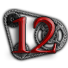
<style>
.page{position:relative;width:68px;height:68px;background:#ffffff}
.page>*{position:absolute;margin:0}
.t1{font:48px "Castellar";font-weight:bold}
</style>
<div class="page">
<p class="t1" style="left:12px;top:17px;width:45px;height:36px">12</p>
</div>
